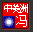
<style>
.page{position:relative;width:33px;height:32px;background:#f20000}
.page>*{position:absolute;margin:0}
.t1{font:10.4px "SimSun";letter-spacing:-0.25em;color:#ffffff}
.t2{font:11.7px "SimSun";color:#ffffff}
</style>
<div class="page">
<p class="t1" style="left:4px;top:4px;width:24px;height:9px">中美洲</p>
<p class="t2" style="left:16px;top:15px;width:11px;height:12px">冯</p>
</div>
